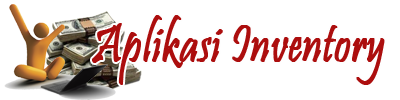
<style>
.page{position:relative;width:400px;height:100px;background:#ffffff}
.page>*{position:absolute;margin:0}
.t1{font:55px "Pristina-Regular";color:#ac0e0e;font-weight:bold;scale:0.82 1}
</style>
<div class="page">
<p class="t1" style="left:92px;top:15px;width:293px;height:70px">Aplikasi Inventory</p>
</div>
